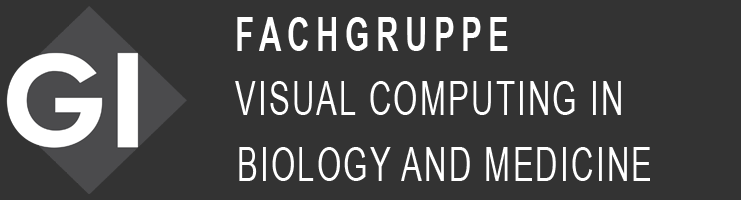
<style>
.page{position:relative;width:741px;height:200px;background:#333333}
.page>*{position:absolute;margin:0}
.t1{font:47.5px "ArialNarrow-Bold";letter-spacing:0.17em;color:#ffffff;scale:0.8 1}
.t2{font:47.5px "ArialNarrow";letter-spacing:0.058em;color:#ffffff;scale:0.8 1}
</style>
<div class="page">
<p class="t1" style="left:237px;top:17px;width:271px;height:34px">FACHGRUPPE</p>
<p class="t2" style="left:235px;top:81px;width:386px;height:34px">VISUAL COMPUTING IN</p>
<p class="t2" style="left:239px;top:147px;width:411px;height:34px">BIOLOGY AND MEDICINE</p>
</div>
